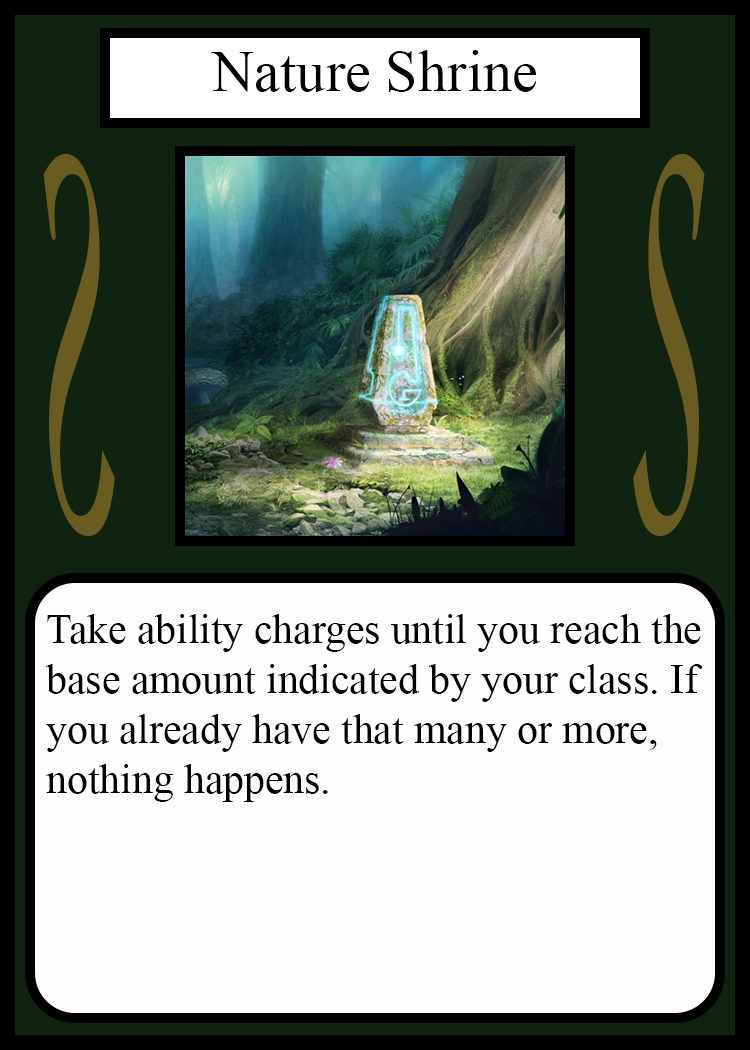
<style>
.page{position:relative;width:750px;height:1050px;background:#fffcfc}
.page>*{position:absolute;margin:0}
.t1{font:58.3px "TimesNewRomanPSMT";color:#010101}
.t2{font:548.5px "Apple-Chancery";color:#6a5c21;scale:0.27 1}
.t3{font:548.2px "Apple-Chancery";color:#6a5c21;scale:0.27 1}
.t4{font:41.7px "TimesNewRomanPSMT";color:#000000}
</style>
<div class="page">
<p class="t1" style="left:211px;top:50px;width:326px;height:42px">Nature Shrine</p>
<p class="t2" style="left:43px;top:154px;width:72px;height:382px;rotate:180deg">S</p>
<p class="t3" style="left:633px;top:154px;width:72px;height:382px">S</p>
<p class="t4" style="left:45px;top:614px;width:658px;height:188px">Take ability charges until you reach the<br>base amount indicated by your class. If <br>you already have that many or more,<br>nothing happens.</p>
</div>
